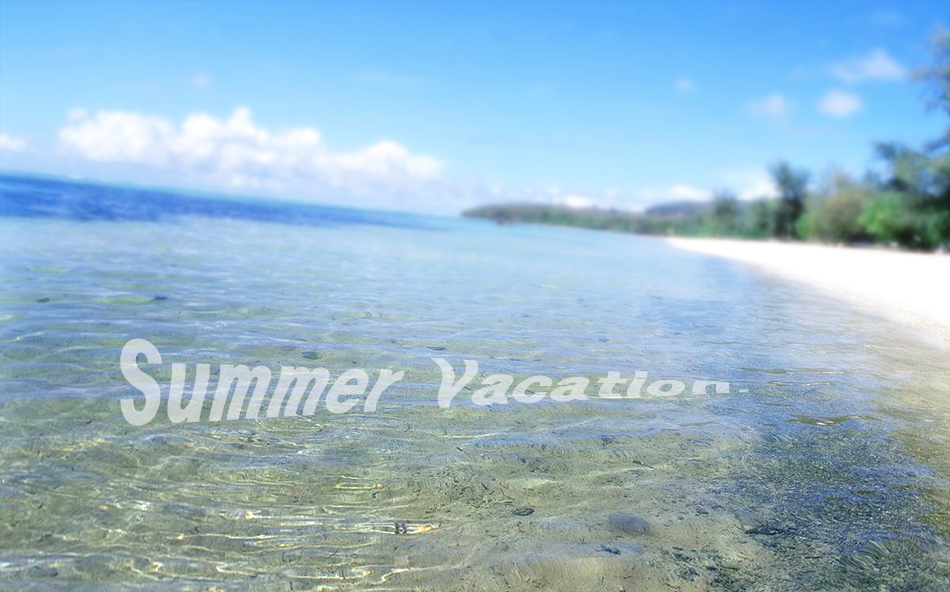
<style>
.page{position:relative;width:950px;height:592px}
.page>*{position:absolute;margin:0}
.t1{font:58px "HeadlineR-HM";color:#cdd6da}
</style>
<div class="page">
<p class="t1" style="left:120px;top:338px;width:629px;height:88px">Summer Vacation.</p>
</div>
